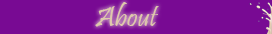
<style>
.page{position:relative;width:272px;height:34px;background:#780a93}
.page>*{position:absolute;margin:0}
.t1{font:30px "Pristina-Regular";color:#dec9ab}
</style>
<div class="page">
<p class="t1" style="left:95px;top:2px;width:64px;height:25px">About</p>
</div>
